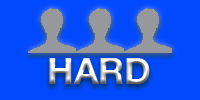
<style>
.page{position:relative;width:200px;height:100px;background:#0149ff}
.page>*{position:absolute;margin:0}
.t1{font:36px "HelveticaNeue-Bold"}
</style>
<div class="page">
<p class="t1" style="left:49px;top:58px;width:101px;height:26px">HARD</p>
</div>
